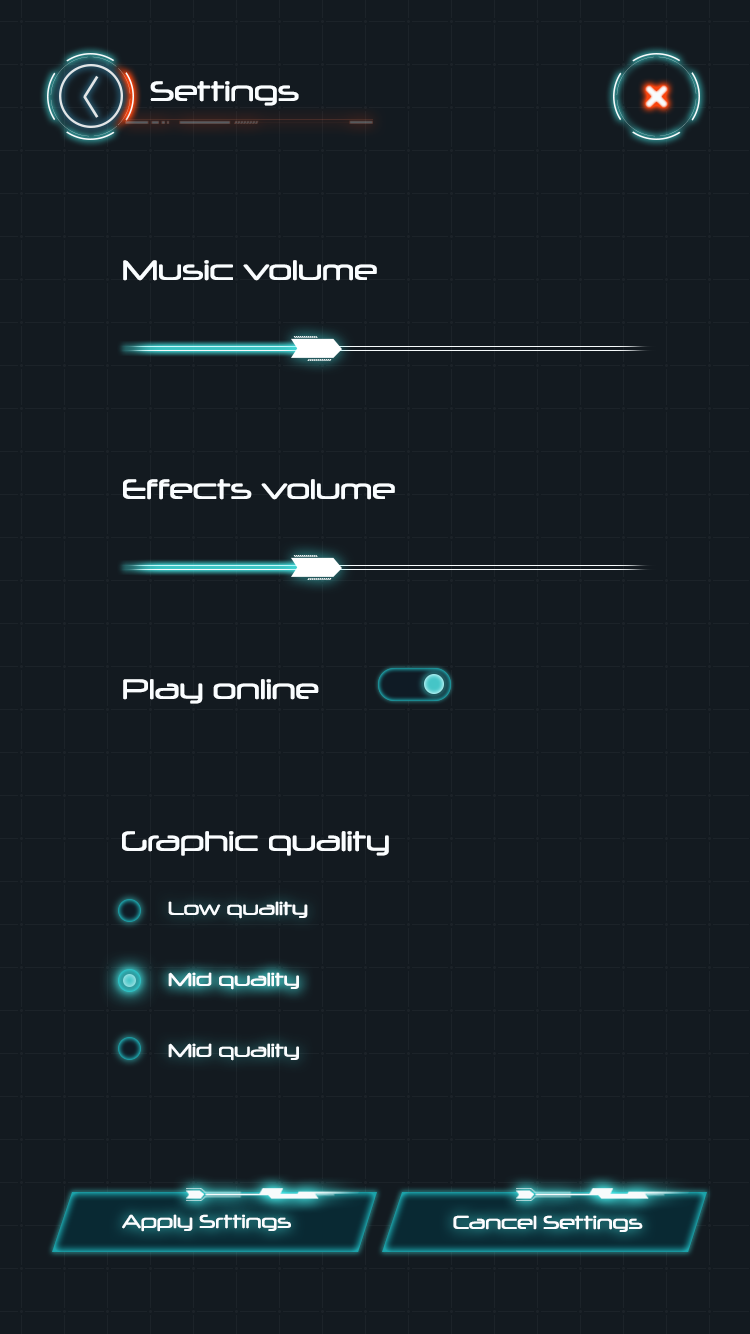
<style>
.page{position:relative;width:750px;height:1334px;background:#131a20}
.page>*{position:absolute;margin:0}
.t1{font:27.2px "Neuropol-Regular";color:#fafdff}
.t2{font:18.1px "Neuropol-Regular";color:#fafdff}
</style>
<div class="page">
<p class="t1" style="left:150px;top:81px;width:149px;height:25px">Settings</p>
<p class="t1" style="left:123px;top:260px;width:254px;height:21px">Music volume</p>
<p class="t1" style="left:123px;top:479px;width:272px;height:21px">Effects volume</p>
<p class="t1" style="left:123px;top:679px;width:196px;height:25px">Play online</p>
<p class="t1" style="left:122px;top:831px;width:267px;height:25px">Graphic quality</p>
<p class="t2" style="left:168px;top:901px;width:140px;height:18px">Low quality</p>
<p class="t2" style="left:168px;top:972px;width:131px;height:18px">Mid quality</p>
<p class="t2" style="left:168px;top:1043px;width:131px;height:18px">Mid quality</p>
<p class="t2" style="left:122px;top:1214px;width:169px;height:18px">Apply Srttings</p>
<p class="t2" style="left:453px;top:1215px;width:190px;height:17px">Cancel Settings</p>
</div>
